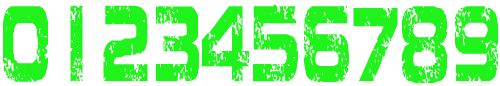
<style>
.page{position:relative;width:500px;height:86px;background:#ffffff}
.page>*{position:absolute;margin:0}
.t1{font:107.4px "JacintoSans";color:#20f31b;scale:0.5 1}
</style>
<div class="page">
<p class="t1" style="left:3px;top:6px;width:45px;height:76px">0</p>
<p class="t1" style="left:70px;top:5px;width:13px;height:76px">1</p>
<p class="t1" style="left:103px;top:5px;width:45px;height:76px">2</p>
<p class="t1" style="left:156px;top:6px;width:43px;height:75px">3</p>
<p class="t1" style="left:202px;top:6px;width:47px;height:76px">4</p>
<p class="t1" style="left:253px;top:4px;width:45px;height:79px">5</p>
<p class="t1" style="left:304px;top:6px;width:45px;height:76px">6</p>
<p class="t1" style="left:402px;top:6px;width:45px;height:77px">8</p>
<p class="t1" style="left:455px;top:6px;width:43px;height:76px">9</p>
<p class="t1" style="left:353px;top:8px;width:45px;height:73px">7</p>
</div>
